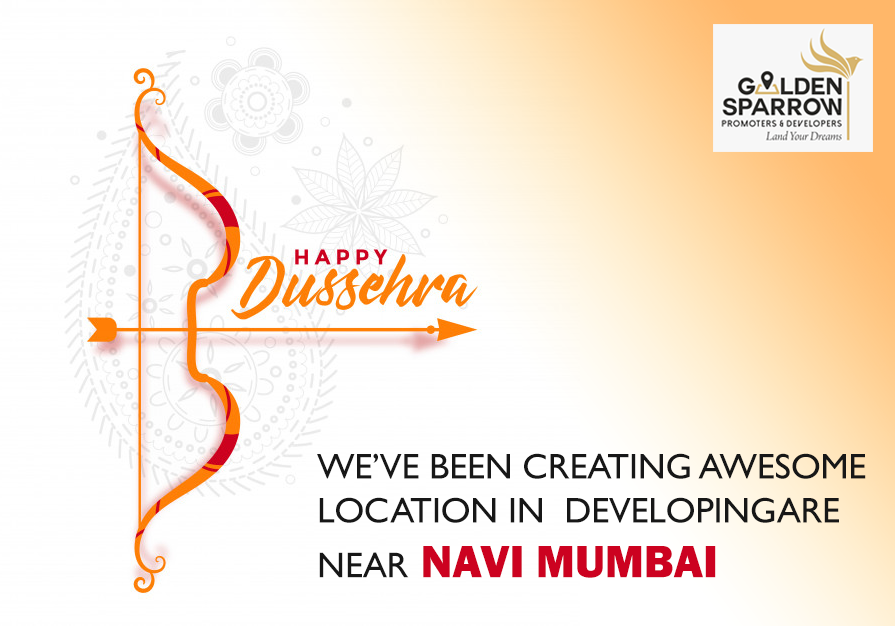
<style>
.page{position:relative;width:895px;height:626px}
.page>*{position:absolute;margin:0}
.t1{font:36px/44px "GillSansMT";letter-spacing:-0.005em;color:#171717;text-transform:uppercase}
.t2{font:46.7px "FranklinGothic-Heavy";letter-spacing:-0.005em;color:#cc0220;text-transform:uppercase}
</style>
<div class="page">
<p class="t1" style="left:317px;top:453px;width:549px;height:125px">We’ve been creating Awesome  location in  developingare near</p>
<p class="t2" style="left:423px;top:546px;width:293px;height:32px">Navi Mumbai</p>
</div>
